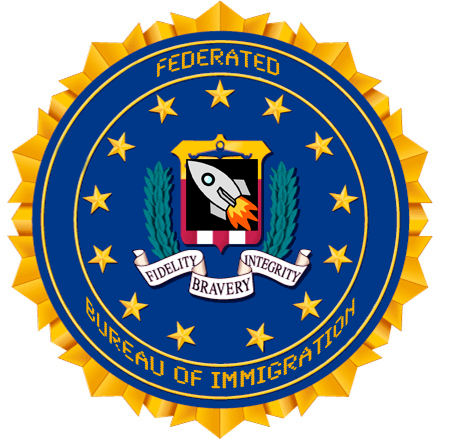
<style>
.page{position:relative;width:453px;height:442px;background:#003889}
.page>*{position:absolute;margin:0}
.t1{font:23.9px "SynchroLET";color:#f5ab00}
</style>
<div class="page">
<p class="t1" style="left:156px;top:48px;width:124px;height:29px">Federated</p>
<p class="t1" style="left:86px;top:296px;width:269px;height:93px;text-align:center">Bureau of Immigration</p>
</div>
